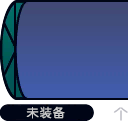
<style>
.page{position:relative;width:128px;height:128px}
.page>*{position:absolute;margin:0}
.t1{font:12px "FZY3--GB1-4";letter-spacing:0.08em;color:#cbcbcb}
.t2{font:14.7px "FZY3--GB1-4";letter-spacing:0.08em;color:#bdbdc5}
</style>
<div class="page">
<p class="t1" style="left:26px;top:106px;width:39px;height:13px">未装备</p>
<p class="t2" style="left:113px;top:107px;width:15px;height:14px">个</p>
</div>
